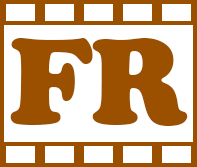
<style>
.page{position:relative;width:197px;height:167px;background:#ffffff}
.page>*{position:absolute;margin:0}
.t1{font:125px "CooperBlack";color:#9b5000}
</style>
<div class="page">
<p class="t1" style="left:10px;top:38px;width:178px;height:88px">FR</p>
</div>
